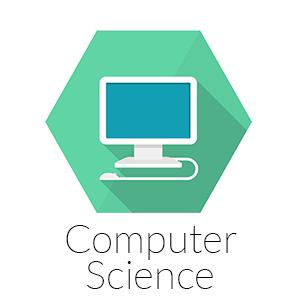
<style>
.page{position:relative;width:300px;height:300px;background:#ffffff}
.page>*{position:absolute;margin:0}
.t1{font:40px/36px "Lato-Thin";color:#000000}
</style>
<div class="page">
<p class="t1" style="left:66px;top:225px;width:171px;height:64px;text-align:center">Computer<br>Science</p>
</div>
